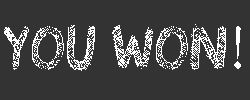
<style>
.page{position:relative;width:250px;height:100px;background:#333333}
.page>*{position:absolute;margin:0}
.t1{font:60px "Drawing-Guides";color:#ffffff}
</style>
<div class="page">
<p class="t1" style="left:4px;top:24px;width:237px;height:47px">!You Won</p>
</div>
